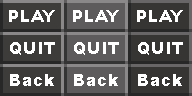
<style>
.page{position:relative;width:192px;height:96px;background:#5d5b5c}
.page>*{position:absolute;margin:0}
.t1{font:16.7px "Arial-Black";color:#ffffff}
</style>
<div class="page">
<p class="t1" style="left:9px;top:10px;width:46px;height:12px">PLAY</p>
<p class="t1" style="left:73px;top:10px;width:46px;height:12px">PLAY</p>
<p class="t1" style="left:137px;top:10px;width:46px;height:12px">PLAY</p>
<p class="t1" style="left:10px;top:42px;width:45px;height:13px">QUIT</p>
<p class="t1" style="left:74px;top:42px;width:45px;height:13px">QUIT</p>
<p class="t1" style="left:138px;top:42px;width:45px;height:13px">QUIT</p>
<p class="t1" style="left:10px;top:74px;width:44px;height:12px">Back</p>
<p class="t1" style="left:74px;top:74px;width:44px;height:12px">Back</p>
<p class="t1" style="left:138px;top:74px;width:44px;height:12px">Back</p>
</div>
